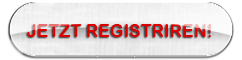
<style>
.page{position:relative;width:242px;height:60px}
.page>*{position:absolute;margin:0}
.t1{font:17.7px "ArialRoundedMTBold";color:#da0101}
</style>
<div class="page">
<p class="t1" style="left:27px;top:24px;width:185px;height:13px">JETZT REGISTRIREN!</p>
</div>
